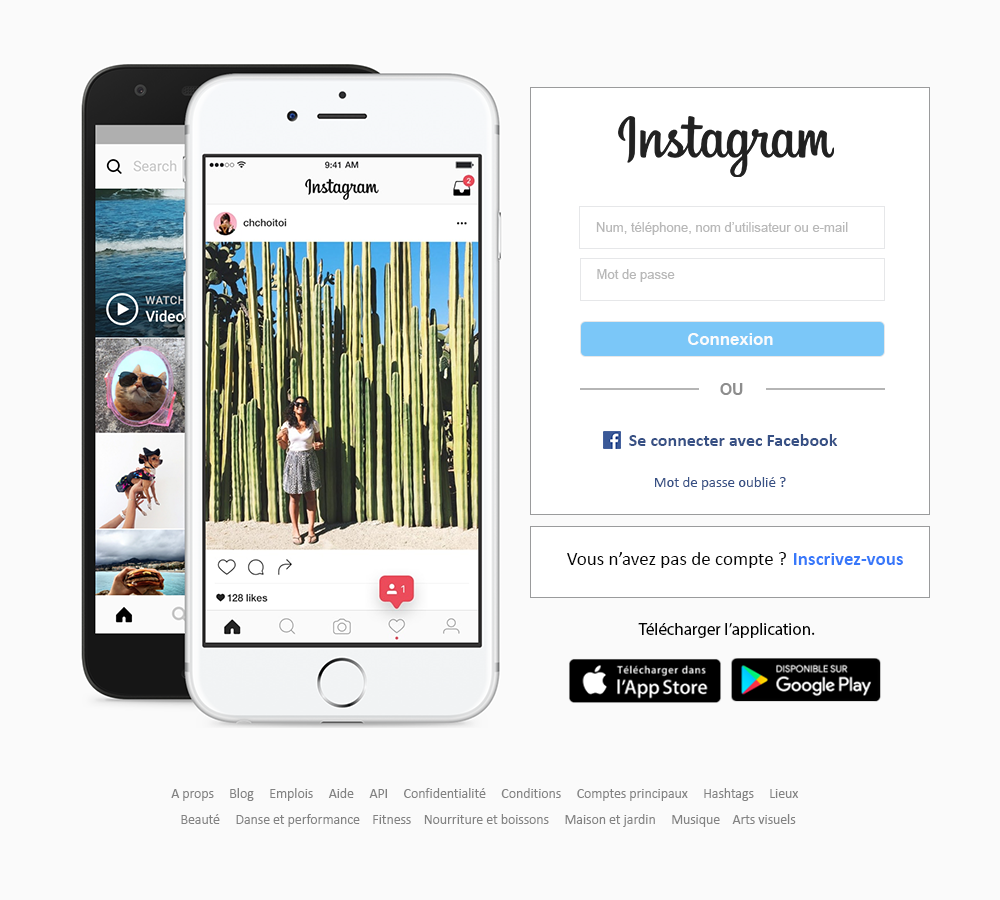
<style>
.page{position:relative;width:1000px;height:900px;background:#fafafa}
.page>*{position:absolute;margin:0}
.t1{font:13.1px "ArialMT";color:#b8b8b8}
.t2{font:13px "ArialMT";color:#b8b8b8}
.t3{font:16.7px "Arial-BoldMT";color:#fafbfc}
.t4{font:15.9px "Arial-BoldMT";color:#8d8d8d}
.t5{font:18px "Calibri-Bold";color:#385185}
.t6{font:14.8px "Calibri";color:#385185}
.t7{font:19.1px "Calibri";color:#040404}
.t8{font:19px "Calibri-Bold";color:#3879fa}
.t9{font:16.9px "MyriadPro-Regular";color:#020202}
.t10{font:13.8px/25.4px "Calibri";color:#828282}
</style>
<div class="page">
<p class="t1" style="left:596px;top:222px;width:252px;height:13px">Num, téléphone, nom d’utilisateur ou e-mail</p>
<p class="t2" style="left:597px;top:269px;width:78px;height:13px">Mot de passe</p>
<p class="t3" style="left:688px;top:333px;width:85px;height:12px">Connexion</p>
<p class="t4" style="left:720px;top:383px;width:23px;height:12px">OU</p>
<p class="t5" style="left:629px;top:434px;width:209px;height:12px">Se connecter avec Facebook</p>
<p class="t6" style="left:655px;top:477px;width:131px;height:13px">Mot de passe oublié ?</p>
<p class="t7" style="left:567px;top:552px;width:219px;height:16px">Vous n’avez pas de compte ?</p>
<p class="t8" style="left:794px;top:553px;width:109px;height:12px">Inscrivez-vous</p>
<p class="t9" style="left:638px;top:623px;width:177px;height:15px">Télécharger l’application.</p>
<p class="t10" style="left:171px;top:788px;width:628px;height:39px">A props     Blog     Emplois     Aide     API     Confidentialité     Conditions     Comptes principaux     Hashtags     Lieux<br>   Beauté     Danse et performance    Fitness    Nourriture et boissons     Maison et jardin     Musique    Arts visuels</p>
</div>
